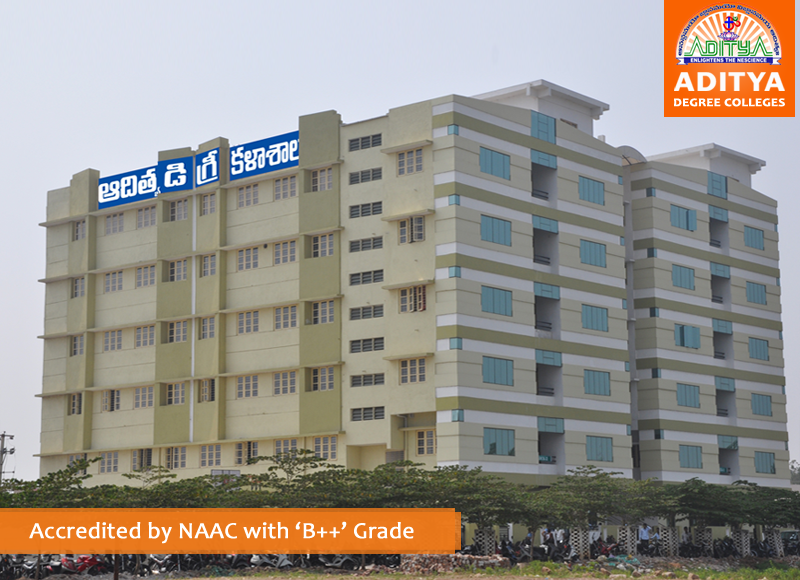
<style>
.page{position:relative;width:800px;height:580px}
.page>*{position:absolute;margin:0}
.t1{font:28.3px "FranklinGothic-Demi";color:#fcfcfc;font-weight:bold;scale:1.19 1}
.t2{font:11.6px "Candara-Bold";color:#ffffff;font-weight:bold;scale:1.14 1}
.t3{font:23.2px "Candara";color:#ffffff;font-weight:bold}
</style>
<div class="page">
<p class="t1" style="left:674px;top:72px;width:111px;height:19px">ADITYA</p>
<p class="t2" style="left:674px;top:98px;width:111px;height:9px">DEGREE COLLEGES</p>
<p class="t3" style="left:29px;top:521px;width:385px;height:23px">Accredited by NAAC with ‘B++’ Grade</p>
</div>
